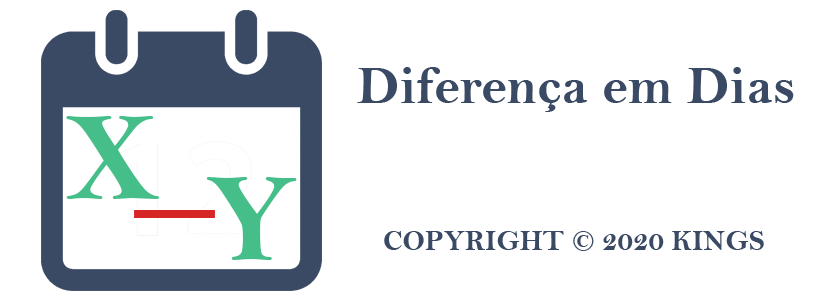
<style>
.page{position:relative;width:834px;height:300px;background:#ffffff}
.page>*{position:absolute;margin:0}
.t1{font:54.2px "BellMTBold";color:#3a4a64}
.t2{font:29.2px "BellMTBold";color:#3a4a64}
</style>
<div class="page">
<p class="t1" style="left:357px;top:67px;width:437px;height:45px">Diferença em Dias</p>
<p class="t2" style="left:384px;top:231px;width:380px;height:20px">COPYRIGHT © 2020 KINGS</p>
</div>
